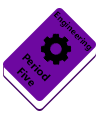
<style>
.page{position:relative;width:100px;height:116px;background:#ffffff}
.page>*{position:absolute;margin:0}
.t1{font:9px "LaoUI-Bold";color:#000000}
.t2{font:11.4px "LaoUI-Bold";color:#000000}
</style>
<div class="page">
<p class="t1" style="left:53px;top:11px;width:39px;height:40px;rotate:45deg">Engineering</p>
<p class="t2" style="left:16px;top:53px;width:35px;height:34px;text-align:center;rotate:45deg">Period<br>Five</p>
</div>
